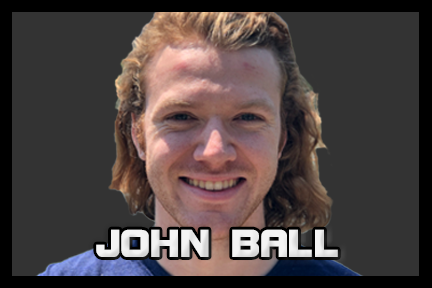
<style>
.page{position:relative;width:432px;height:288px;background:#333333}
.page>*{position:absolute;margin:0}
.t1{font:41.7px "BolsterBold";color:#f3f3f3}
</style>
<div class="page">
<p class="t1" style="left:96px;top:229px;width:242px;height:28px">JOHN BALL</p>
</div>
